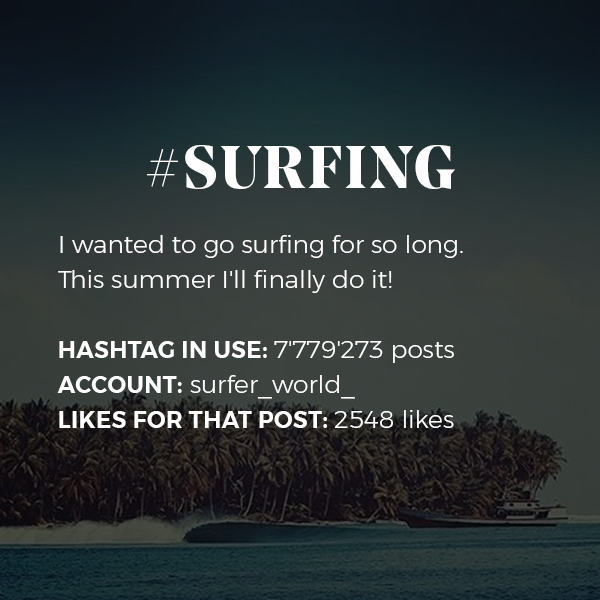
<style>
.page{position:relative;width:600px;height:600px}
.page>*{position:absolute;margin:0}
.t1{font:25px "Montserrat-Light";color:#ffffff}
.t2{font:60px/35px "NoeDisplay-Bold";letter-spacing:0.05em;color:#ffffff;text-transform:uppercase}
.t3{font:23px/35px "Montserrat-SemiBold";letter-spacing:0.02em;color:#ffffff;text-transform:uppercase}
.t4{font:25px/35px "Montserrat-Light";color:#ffffff}
</style>
<div class="page">
<p class="t1" style="left:57px;top:145px;width:406px;height:283px;text-align:center"><span class="t2">#surfing<br><br></span>I wanted to go surfing for so long. <br>This summer I'll finally do it!<span class="t3"> <br><br>Hashtag in use: </span><span class="t4">7'779'273 posts<br></span><span class="t3">Account:</span><span class="t4"> surfer_world_<br></span><span class="t3">Likes for that post: </span><span class="t4">2548 likes</span></p>
</div>
